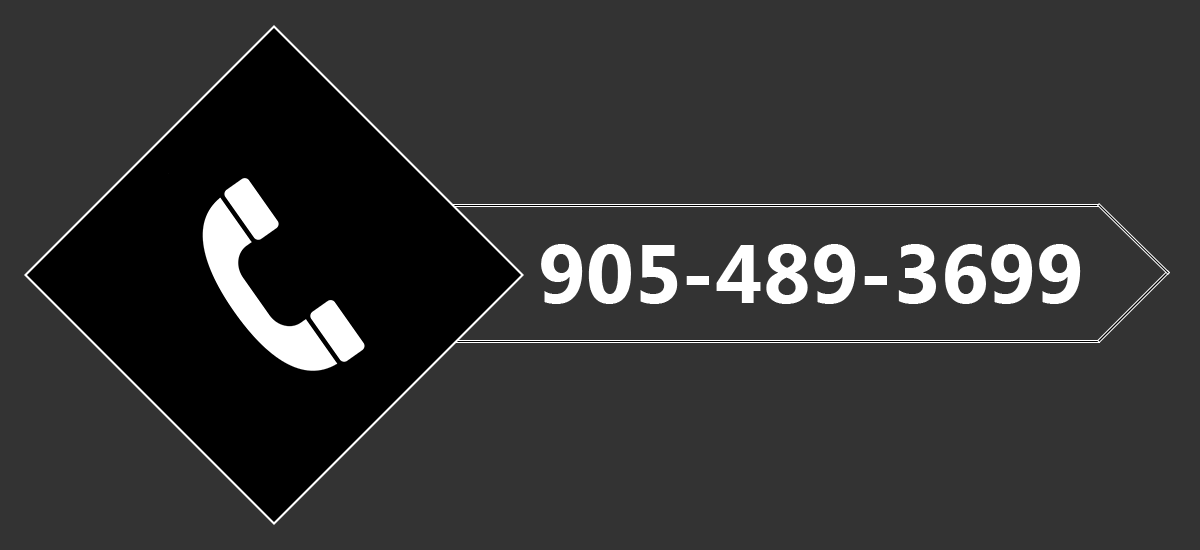
<style>
.page{position:relative;width:1200px;height:550px;background:#333333}
.page>*{position:absolute;margin:0}
.t1{font:83.3px "KhmerUI-Bold";color:#ffffff}
</style>
<div class="page">
<p class="t1" style="left:541px;top:244px;width:540px;height:60px">905-489-3699</p>
</div>
